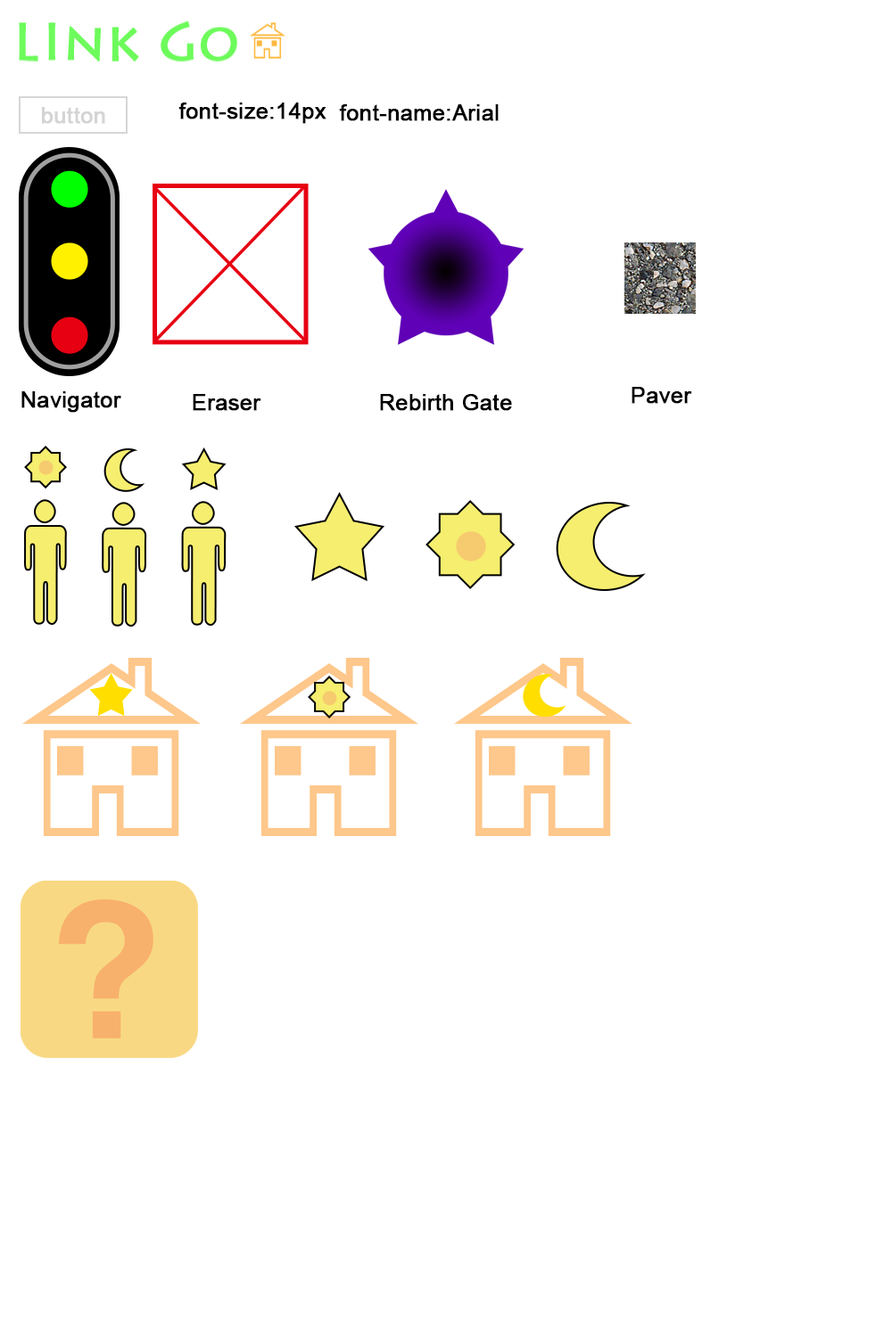
<style>
.page{position:relative;width:892px;height:1337px;background:#ffffff}
.page>*{position:absolute;margin:0}
.t1{font:22.3px "ArialMT";color:#000000;font-weight:bold}
</style>
<div class="page">
<p class="t1" style="left:178px;top:103px;width:148px;height:21px">font-size:14px</p>
<p class="t1" style="left:339px;top:104px;width:159px;height:17px">font-name:Arial</p>
<p class="t1" style="left:631px;top:387px;width:61px;height:17px">Paver</p>
<p class="t1" style="left:21px;top:391px;width:100px;height:22px">Navigator</p>
<p class="t1" style="left:193px;top:394px;width:68px;height:17px">Eraser</p>
<p class="t1" style="left:380px;top:394px;width:132px;height:17px">Rebirth Gate</p>
</div>
